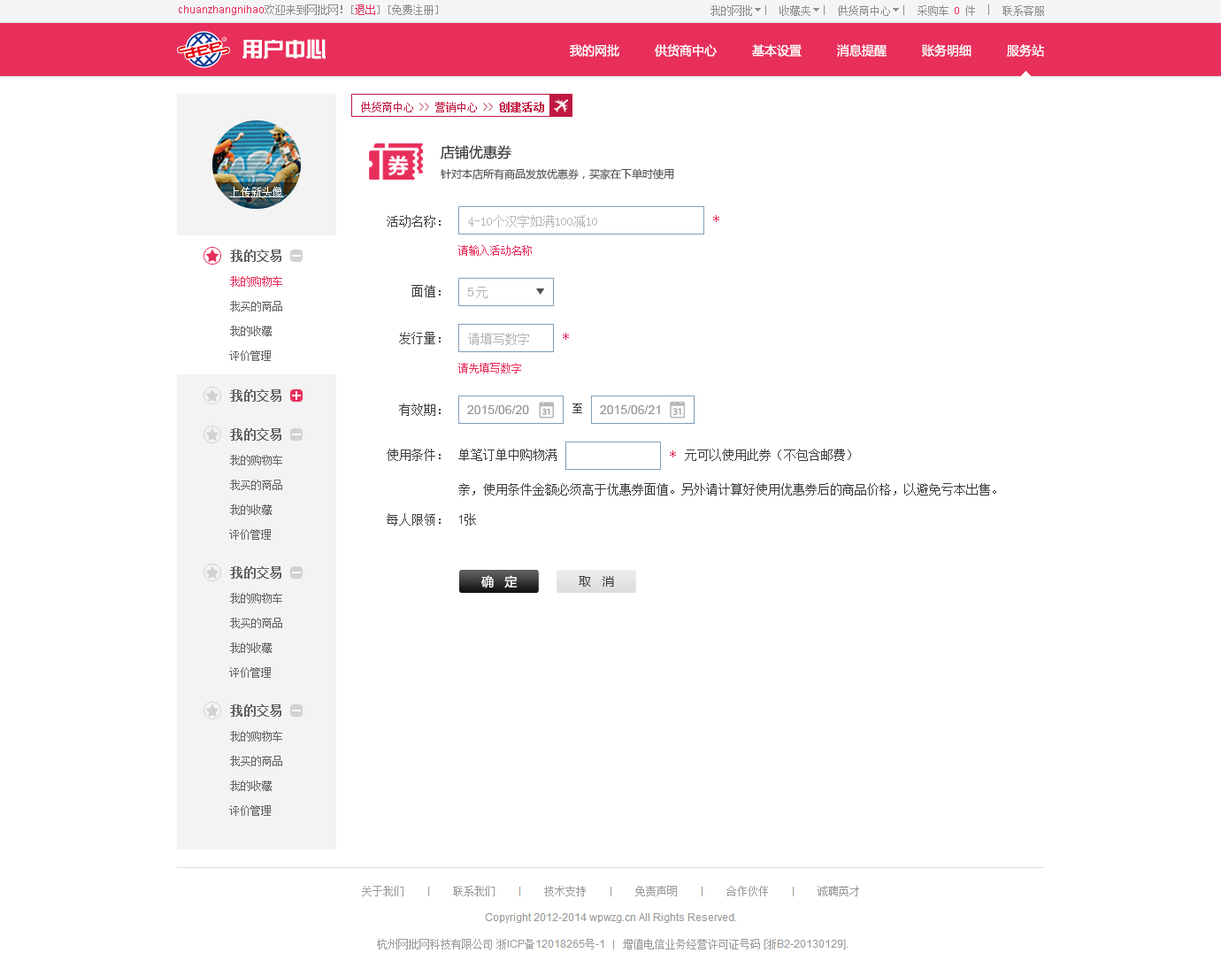
<style>
.page{position:relative;width:1221px;height:976px;background:#ffffff}
.page>*{position:absolute;margin:0}
.t1{font:10.6px "ArialMT";color:#e82f5b}
.t2{font:10.6px "SimSun";color:#8e8e8e}
.t3{font:10.6px "SimSun";color:#e82f5b}
.t4{font:21.2px "JZhongYi";color:#ffffff}
.t5{font:12.4px "MicrosoftYaHei";color:#ffffff}
.t6{font:14.2px "MicrosoftYaHei";color:#3c3c3c}
.t7{font:10.6px "MicrosoftYaHei";color:#505050}
.t8{font:10.6px "SimSun";color:#ffffff;text-decoration:underline}
.t9{font:12.4px "SimSun";color:#3c3c3c}
.t10{font:12.4px "SimSun";color:#b4b4b4}
.t11{font:12.4px "SimSun";color:#e82f5b}
.t12{font:12.4px "SimSun";color:#646464;font-weight:bold}
.t13{font:12.4px "ArialMT";color:#b4b4b4}
.t14{font:10.6px "SimSun";color:#646464}
.t15{font:12.4px "ArialMT";color:#909090}
.t16{font:12.4px "AdobeHeitiStd-Regular";color:#3c3c3c}
.t17{font:12.4px "ArialMT";color:#3c3c3c}
.t18{font:12.4px "MicrosoftYaHei";color:#3c3c3c}
</style>
<div class="page">
<p class="t1" style="left:179px;top:4px;width:259px;height:11px">chuanzhangnihao<span class="t2">欢迎来到网批网！[</span><span class="t3">退出</span><span class="t2">] [免费注册]</span></p>
<p class="t2" style="left:711px;top:5px;width:333px;height:11px">我的网批     收藏夹     供货商中心     采购车 <span class="t3">0</span> 件     联系客服</p>
<p class="t4" style="left:243px;top:39px;width:83px;height:20px">用户中心</p>
<p class="t5" style="left:570px;top:44px;width:50px;height:13px">我的网批</p>
<p class="t5" style="left:655px;top:44px;width:62px;height:13px">供货商中心</p>
<p class="t5" style="left:752px;top:44px;width:50px;height:13px">基本设置</p>
<p class="t5" style="left:837px;top:44px;width:50px;height:13px">消息提醒</p>
<p class="t5" style="left:922px;top:44px;width:50px;height:13px">账务明细</p>
<p class="t5" style="left:1007px;top:44px;width:37px;height:13px">服务站</p>
<p class="t6" style="left:441px;top:145px;width:71px;height:14px">店铺优惠券</p>
<p class="t7" style="left:441px;top:168px;width:233px;height:12px">针对本店所有商品发放优惠券，买家在下单时使用</p>
<p class="t8" style="left:230px;top:187px;width:54px;height:10px">上传新头像</p>
<p class="t9" style="left:387px;top:215px;width:54px;height:12px">活动名称：</p>
<p class="t10" style="left:468px;top:215px;width:129px;height:12px">4-10个汉字如满100减10</p>
<p class="t11" style="left:713px;top:215px;width:7px;height:7px">*</p>
<p class="t3" style="left:458px;top:245px;width:74px;height:11px">请输入活动名称</p>
<p class="t12" style="left:230px;top:250px;width:51px;height:12px">我的交易</p>
<p class="t3" style="left:230px;top:276px;width:52px;height:11px">我的购物车</p>
<p class="t9" style="left:412px;top:285px;width:29px;height:12px">面值：</p>
<p class="t13" style="left:467px;top:288px;width:7px;height:9px">5</p>
<p class="t10" style="left:476px;top:287px;width:12px;height:11px">元</p>
<p class="t14" style="left:230px;top:301px;width:52px;height:11px">我买的商品</p>
<p class="t14" style="left:230px;top:326px;width:42px;height:10px">我的收藏</p>
<p class="t9" style="left:399px;top:332px;width:42px;height:12px">发行量：</p>
<p class="t10" style="left:468px;top:333px;width:61px;height:12px">请填写数字</p>
<p class="t11" style="left:563px;top:333px;width:6px;height:7px">*</p>
<p class="t14" style="left:229px;top:350px;width:42px;height:11px">评价管理</p>
<p class="t3" style="left:458px;top:363px;width:63px;height:11px">请先填写数字</p>
<p class="t12" style="left:230px;top:389px;width:51px;height:13px">我的交易</p>
<p class="t9" style="left:399px;top:404px;width:42px;height:12px">有效期：</p>
<p class="t15" style="left:467px;top:405px;width:62px;height:9px">2015/06/20</p>
<p class="t16" style="left:573px;top:404px;width:9px;height:9px">至</p>
<p class="t15" style="left:600px;top:405px;width:60px;height:9px">2015/06/21</p>
<p class="t12" style="left:230px;top:428px;width:51px;height:13px">我的交易</p>
<p class="t9" style="left:387px;top:449px;width:54px;height:12px">使用条件：</p>
<p class="t9" style="left:458px;top:449px;width:99px;height:12px">单笔订单中购物满</p>
<p class="t9" style="left:685px;top:449px;width:166px;height:12px">元可以使用此券（不包含邮费）</p>
<p class="t14" style="left:230px;top:455px;width:52px;height:11px">我的购物车</p>
<p class="t11" style="left:670px;top:451px;width:6px;height:7px">*</p>
<p class="t14" style="left:230px;top:480px;width:52px;height:10px">我买的商品</p>
<p class="t9" style="left:458px;top:483px;width:539px;height:13px">亲，使用条件金额必须高于优惠券面值。另外请计算好使用优惠券后的商品价格，以避免亏本出售。</p>
<p class="t14" style="left:230px;top:505px;width:42px;height:10px">我的收藏</p>
<p class="t9" style="left:387px;top:513px;width:54px;height:13px">每人限领：</p>
<p class="t17" style="left:459px;top:513px;width:17px;height:13px">1<span class="t9">张</span></p>
<p class="t14" style="left:229px;top:529px;width:42px;height:11px">评价管理</p>
<p class="t12" style="left:230px;top:566px;width:51px;height:13px">我的交易</p>
<p class="t5" style="left:481px;top:575px;width:37px;height:14px">确   定</p>
<p class="t18" style="left:579px;top:576px;width:35px;height:11px">取   消</p>
<p class="t14" style="left:230px;top:593px;width:52px;height:11px">我的购物车</p>
<p class="t14" style="left:230px;top:618px;width:52px;height:10px">我买的商品</p>
<p class="t14" style="left:230px;top:643px;width:42px;height:10px">我的收藏</p>
<p class="t14" style="left:229px;top:667px;width:42px;height:11px">评价管理</p>
<p class="t12" style="left:230px;top:705px;width:51px;height:12px">我的交易</p>
<p class="t14" style="left:230px;top:731px;width:52px;height:11px">我的购物车</p>
<p class="t14" style="left:230px;top:756px;width:52px;height:10px">我买的商品</p>
<p class="t14" style="left:230px;top:781px;width:42px;height:10px">我的收藏</p>
<p class="t14" style="left:229px;top:805px;width:42px;height:11px">评价管理</p>
</div>
